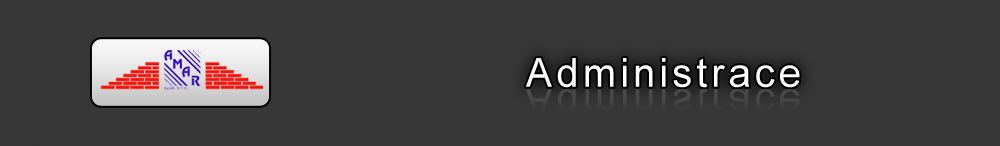
<style>
.page{position:relative;width:1000px;height:146px;background:#373737}
.page>*{position:absolute;margin:0}
.t1{font:40px "ArialMT";letter-spacing:0.1em;color:#ffffff}
</style>
<div class="page">
<p class="t1" style="left:525px;top:58px;width:275px;height:30px">Administrace</p>
</div>
